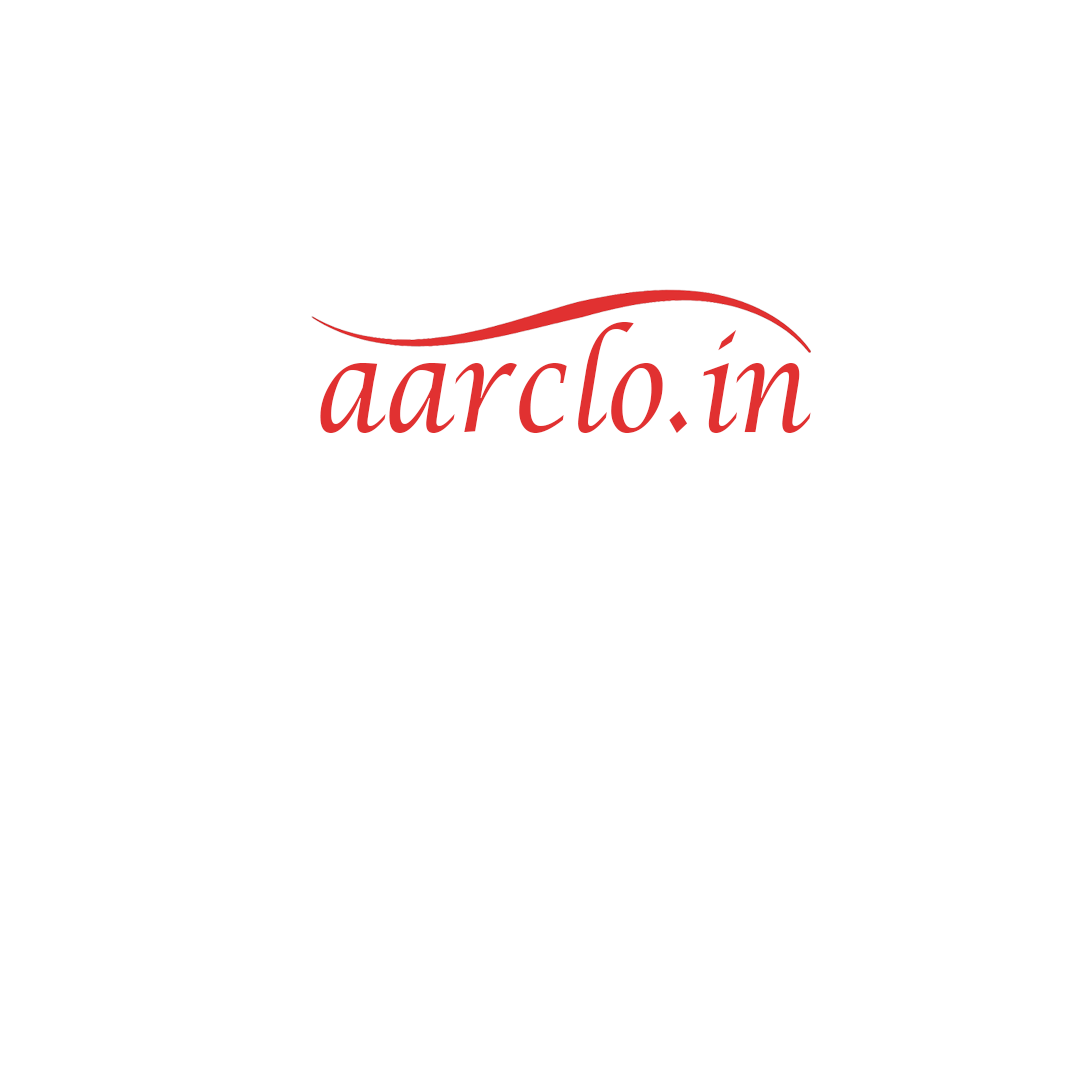
<style>
.page{position:relative;width:1080px;height:1080px;background:#ffffff}
.page>*{position:absolute;margin:0}
.t1{font:128.8px "LucidaCalligraphy-Italic";color:#e13131;scale:0.81 1}
</style>
<div class="page">
<p class="t1" style="left:320px;top:322px;width:491px;height:111px">aarclo.in</p>
</div>
